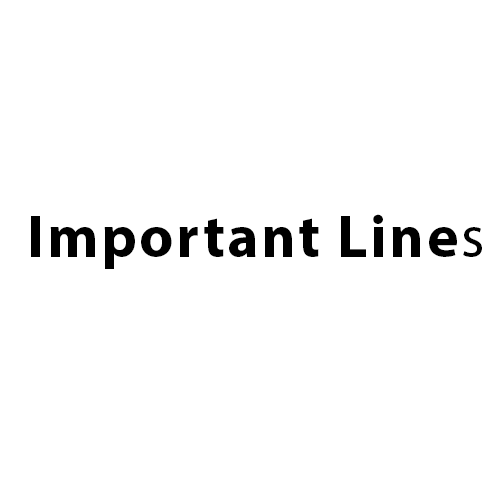
<style>
.page{position:relative;width:500px;height:500px;background:#ffffff}
.page>*{position:absolute;margin:0}
.t1{font:60px "MyriadHebrew-Bold";letter-spacing:0.04em;color:#000000}
.t2{font:60px "MyriadHebrew-Regular";letter-spacing:0.04em;color:#000000}
</style>
<div class="page">
<p class="t1" style="left:31px;top:214px;width:451px;height:55px">Important Line<span class="t2">s</span></p>
</div>
